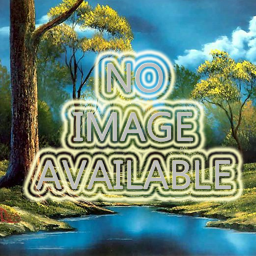
<style>
.page{position:relative;width:256px;height:256px}
.page>*{position:absolute;margin:0}
.t1{font:40.4px "Gadugi";color:#bdbdbd}
</style>
<div class="page">
<p class="t1" style="left:36px;top:63px;width:195px;height:126px;text-align:center">NO<br>IMAGE<br>AVAILABLE</p>
</div>
